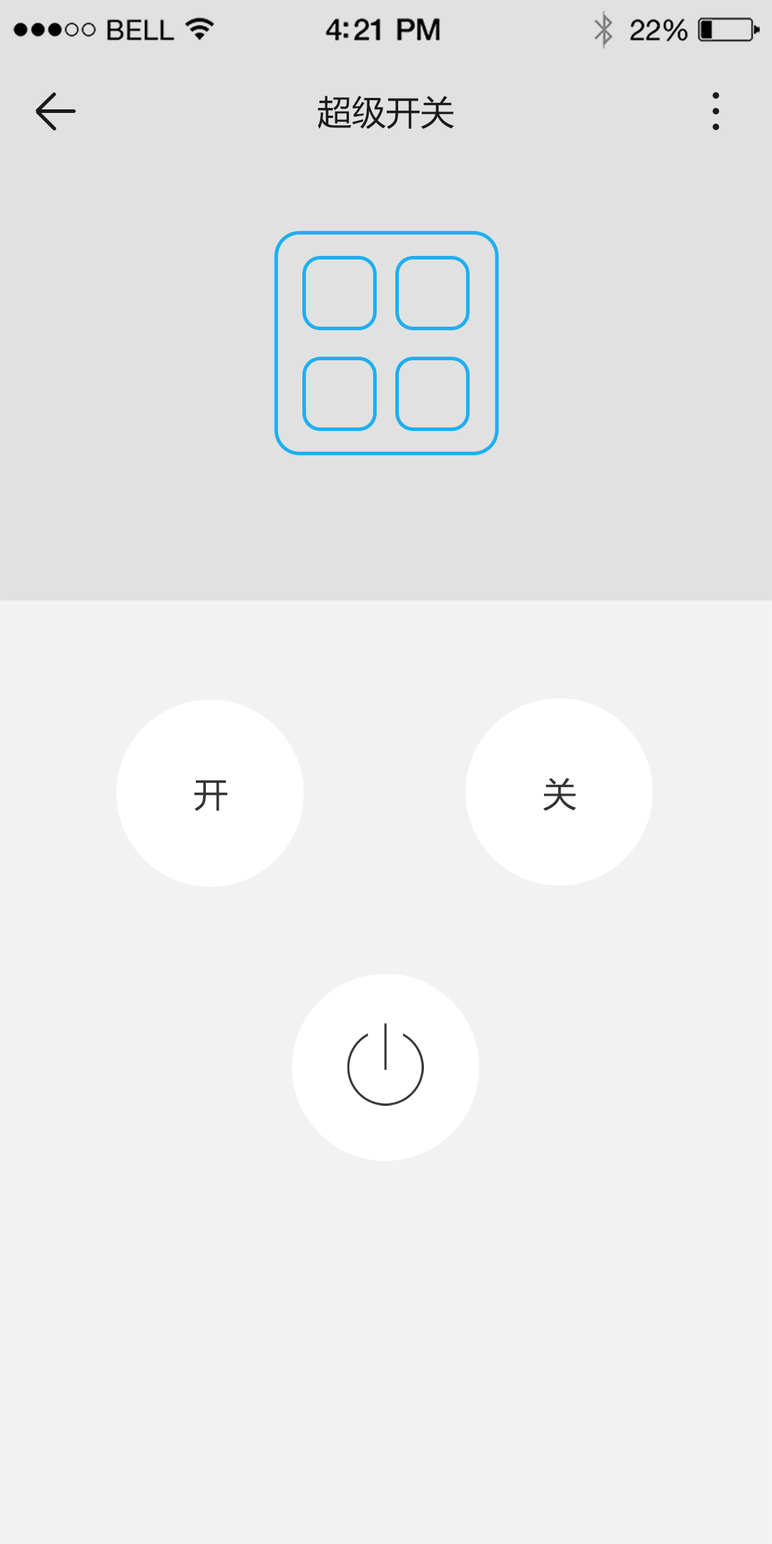
<style>
.page{position:relative;width:772px;height:1544px;background:#f2f2f2}
.page>*{position:absolute;margin:0}
.t1{font:34.3px "MicrosoftYaHei";color:#1a1a1a}
.t2{font:34.3px "MicrosoftYaHei";letter-spacing:0.115em;color:#333333}
</style>
<div class="page">
<p class="t1" style="left:317px;top:96px;width:137px;height:33px">超级开关</p>
<p class="t2" style="left:194px;top:778px;width:382px;height:33px">开                      关</p>
</div>
